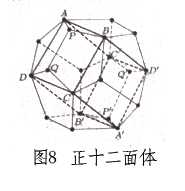
<style>
.page{position:relative;width:185px;height:191px;background:#ffffff}
.page>*{position:absolute;margin:0}
.t1{font:19px "STFangsong";letter-spacing:0.1em;color:#040404}
</style>
<div class="page">
<p class="t1" style="left:34px;top:148px;width:123px;height:18px">图8  正十二面体</p>
</div>
